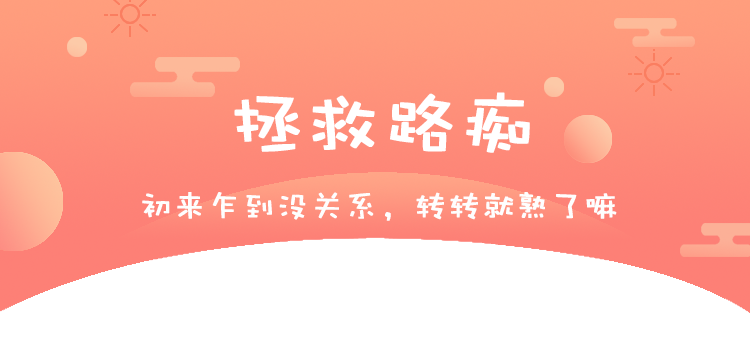
<style>
.page{position:relative;width:750px;height:350px;background:#ffffff}
.page>*{position:absolute;margin:0}
.t1{font:75px "DFPWaWaW5";color:#ffffff;font-weight:bold}
.t2{font:33.3px "DFPWaWaW5";color:#fefefe;font-weight:bold}
</style>
<div class="page">
<p class="t1" style="left:234px;top:92px;width:296px;height:61px">拯救路痴</p>
<p class="t2" style="left:142px;top:192px;width:475px;height:29px">初来乍到没关系，转转就熟了嘛</p>
</div>
